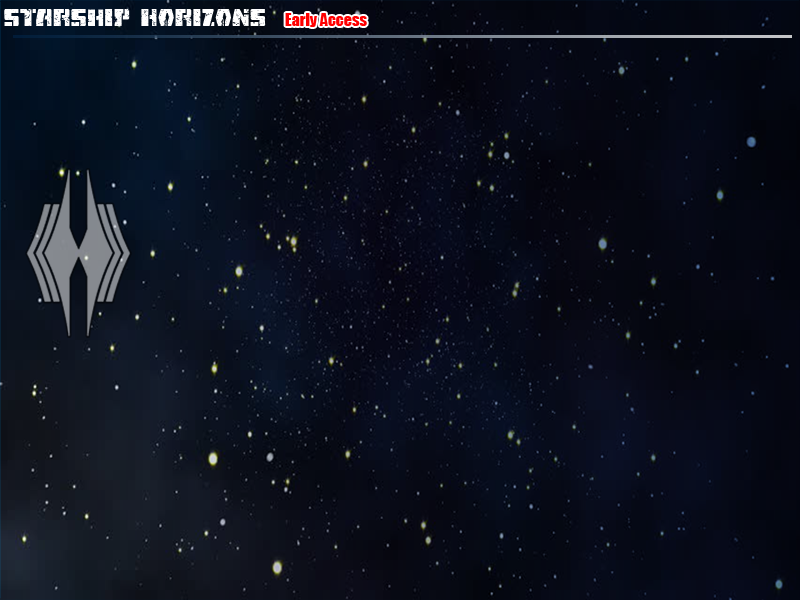
<style>
.page{position:relative;width:800px;height:600px}
.page>*{position:absolute;margin:0}
.t1{font:23.6px "FireFightBB";color:#ffffff}
.t2{font:16px "Impact";color:#ff0000}
</style>
<div class="page">
<p class="t1" style="left:4px;top:9px;width:262px;height:17px">Starship Horizons</p>
<p class="t2" style="left:285px;top:13px;width:82px;height:14px">Early Access</p>
</div>
